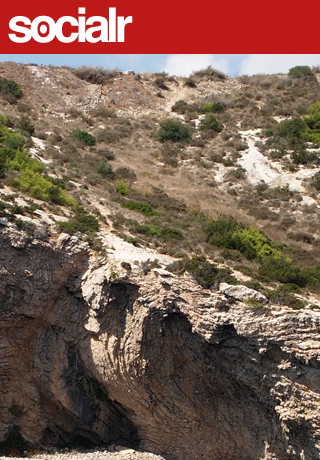
<style>
.page{position:relative;width:320px;height:460px}
.page>*{position:absolute;margin:0}
.t1{font:48px "Helvetica-Bold";letter-spacing:-0.1em;color:#ffffff}
</style>
<div class="page">
<p class="t1" style="left:8px;top:7px;width:125px;height:36px">socialr</p>
</div>
